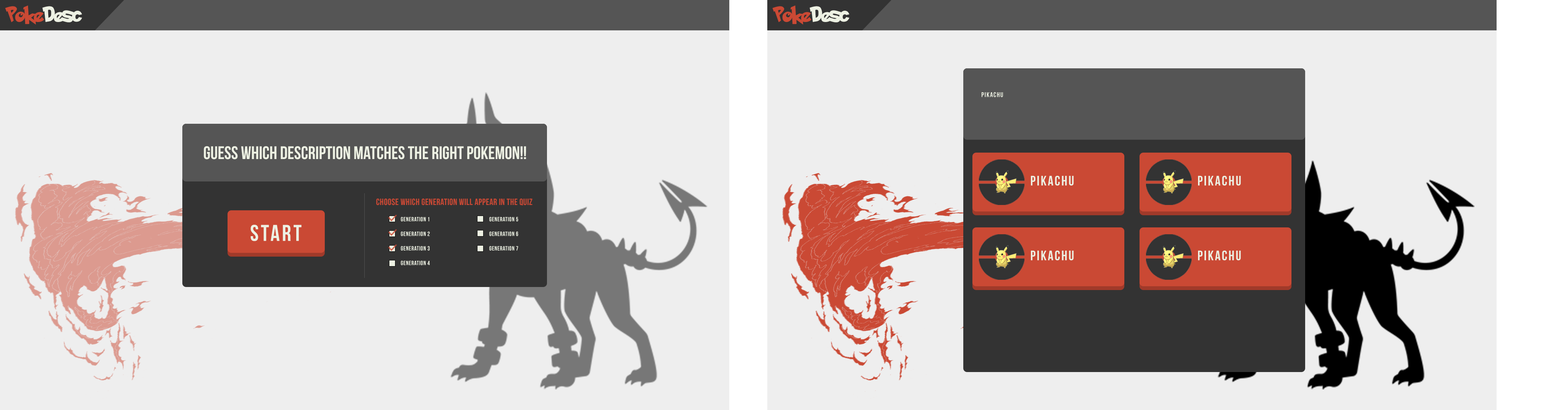
<style>
.page{position:relative;width:1568px;height:410px;background:#eeeeee}
.page>*{position:absolute;margin:0}
.t1{font:17.6px "PokemonSolidNormal";color:#ca4934}
.t2{font:17.6px "PokemonSolidNormal";color:#edf1e3}
.t3{font:6.8px "BebasNeue";letter-spacing:0.1em;color:#edf1e3}
.t4{font:18.2px "BebasNeue";color:#edf1e3}
.t5{font:13.7px "BebasNeue";letter-spacing:0.1em;color:#edf1e3}
.t6{font:9.1px "BebasNeue";letter-spacing:0.025em;color:#ca4934}
.t7{font:6.1px "BebasNeue";letter-spacing:0.05em;color:#edf1e3}
.t8{font:22.8px "BebasNeue";letter-spacing:0.1em;color:#edf1e3}
</style>
<div class="page">
<p class="t1" style="left:5px;top:5px;width:77px;height:20px">Poke<span class="t2">Desc</span></p>
<p class="t1" style="left:772px;top:5px;width:77px;height:20px">Poke<span class="t2">Desc</span></p>
<p class="t3" style="left:982px;top:92px;width:21px;height:5px">Pikachu</p>
<p class="t4" style="left:204px;top:146px;width:322px;height:14px">Guess which description matches the right pokemon!!</p>
<p class="t5" style="left:1031px;top:176px;width:43px;height:10px">Pikachu</p>
<p class="t5" style="left:1198px;top:176px;width:43px;height:10px">Pikachu</p>
<p class="t6" style="left:376px;top:199px;width:157px;height:6px">Choose which generation will appear in the quiz</p>
<p class="t7" style="left:401px;top:217px;width:29px;height:49px">Generation 1<br><br>Generation 2<br><br>Generation 3<br><br>Generation 4</p>
<p class="t7" style="left:489px;top:217px;width:29px;height:34px">Generation 5<br><br>Generation 6<br><br>Generation 7</p>
<p class="t8" style="left:251px;top:225px;width:51px;height:16px">Start</p>
<p class="t5" style="left:1031px;top:251px;width:43px;height:10px">Pikachu</p>
<p class="t5" style="left:1198px;top:251px;width:43px;height:10px">Pikachu</p>
</div>
